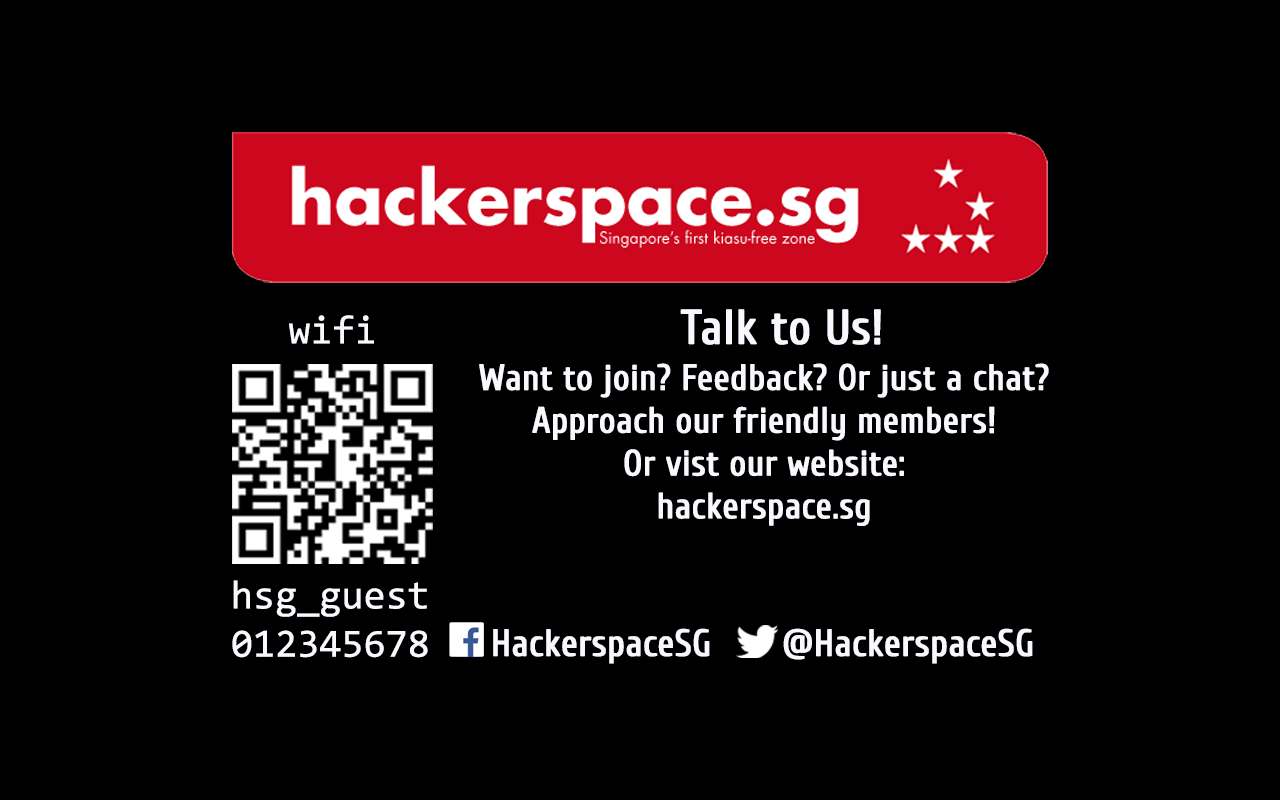
<style>
.page{position:relative;width:1280px;height:800px;background:#000000}
.page>*{position:absolute;margin:0}
.t1{font:40.2px "Consolas";color:#f8f8ff}
.t2{font:48px "Cuprum-Regular";color:#f8f8ff;font-weight:bold}
.t3{font:35.7px "Cuprum-Regular";color:#f8f8ff;font-weight:bold}
.t4{font:36.9px "Cuprum-Regular";color:#f8f8ff;font-weight:bold}
</style>
<div class="page">
<p class="t1" style="left:289px;top:315px;width:85px;height:29px">wifi</p>
<p class="t2" style="left:680px;top:309px;width:201px;height:36px">Talk to Us!</p>
<p class="t3" style="left:479px;top:363px;width:570px;height:163px;text-align:center">Want to join? Feedback? Or just a chat?<br>Approach our friendly members!<br>Or vist our website:<br>hackerspace.sg</p>
<p class="t1" style="left:232px;top:580px;width:196px;height:78px">hsg_guest<br>012345678</p>
<p class="t4" style="left:493px;top:628px;width:217px;height:36px">HackerspaceSG</p>
<p class="t4" style="left:783px;top:628px;width:250px;height:36px">@HackerspaceSG</p>
</div>
